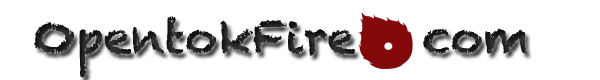
<style>
.page{position:relative;width:600px;height:80px;background:#ffffff}
.page>*{position:absolute;margin:0}
.t1{font:45px "Chalkduster";color:#343434}
.t2{font:60px "Chalkduster";color:#343434}
</style>
<div class="page">
<p class="t1" style="left:34px;top:16px;width:493px;height:62px"><span class="t2">o</span>pentokFire   com</p>
</div>
